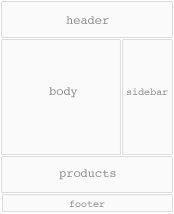
<style>
.page{position:relative;width:174px;height:214px;background:#fafafa}
.page>*{position:absolute;margin:0}
.t1{font:12px "Courier";color:#8e8f91}
.t2{font:10px "Courier";color:#8e8f91}
</style>
<div class="page">
<p class="t1" style="left:66px;top:16px;width:43px;height:8px">header</p>
<p class="t1" style="left:49px;top:87px;width:29px;height:11px">body</p>
<p class="t2" style="left:127px;top:88px;width:41px;height:7px">sidebar</p>
<p class="t1" style="left:59px;top:169px;width:57px;height:11px">products</p>
<p class="t2" style="left:70px;top:200px;width:35px;height:7px">footer</p>
</div>
